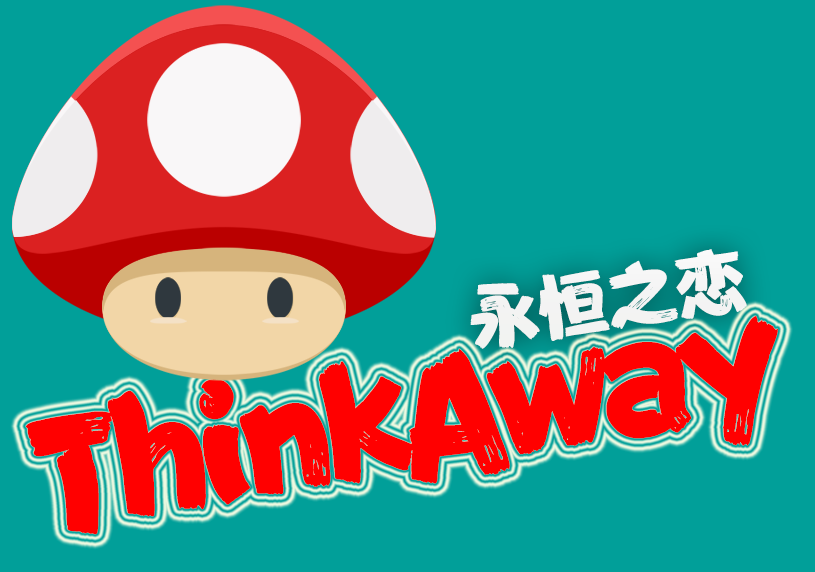
<style>
.page{position:relative;width:815px;height:572px;background:#019f99}
.page>*{position:absolute;margin:0}
.t1{font:69.6px "FZFENSTXJW--GB1-0";color:#ffffff}
.t2{font:151.2px "FZFENSTXJW--GB1-0";letter-spacing:-0.08em;color:#ff0000}
</style>
<div class="page">
<p class="t1" style="left:470px;top:249px;width:277px;height:100px;rotate:-9deg">永恒之恋</p>
<p class="t2" style="left:26px;top:316px;width:752px;height:219px;rotate:-9deg">ThinkAway</p>
</div>
